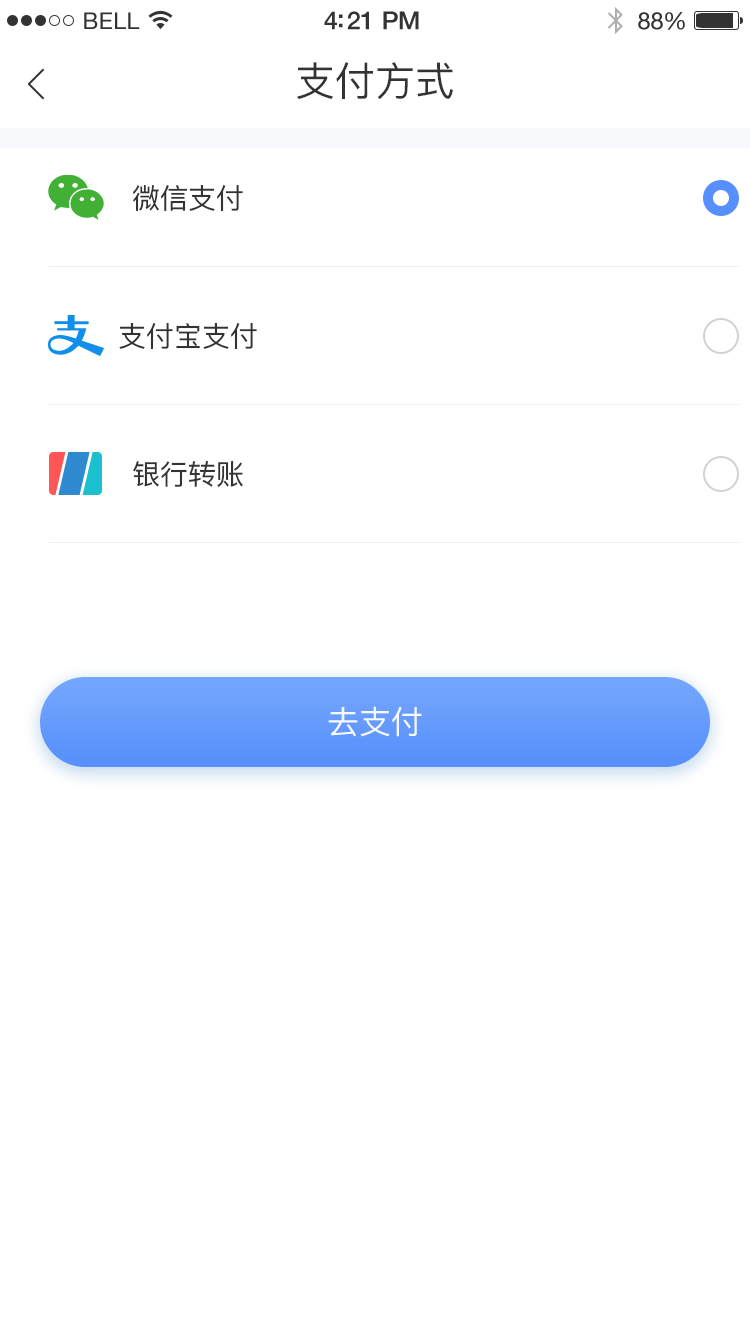
<style>
.page{position:relative;width:750px;height:1334px;background:#ffffff}
.page>*{position:absolute;margin:0}
.t1{font:23px "HelveticaNeue";letter-spacing:0.02em;color:#333333}
.t2{font:25px "HelveticaNeue-Medium";letter-spacing:-0.02em;color:#333333}
.t3{font:24px "HelveticaNeue";letter-spacing:-0.02em;color:#333333}
.t4{font:40px "PingFangSC-Regular";color:#333333}
.t5{font:28px "PingFangSC-Regular";color:#333333}
.t6{font:32px "PingFangSC-Regular";color:#f8f9fc}
</style>
<div class="page">
<p class="t1" style="left:84px;top:12px;width:56px;height:17px">BELL</p>
<p class="t2" style="left:324px;top:11px;width:95px;height:19px">4:21 PM</p>
<p class="t3" style="left:638px;top:12px;width:47px;height:18px">88%</p>
<p class="t4" style="left:297px;top:62px;width:156px;height:37px">支付方式</p>
<p class="t5" style="left:133px;top:184px;width:110px;height:27px">微信支付</p>
<p class="t5" style="left:119px;top:322px;width:138px;height:27px">支付宝支付</p>
<p class="t5" style="left:133px;top:461px;width:110px;height:26px">银行转账</p>
<p class="t6" style="left:328px;top:706px;width:94px;height:31px">去支付</p>
</div>
